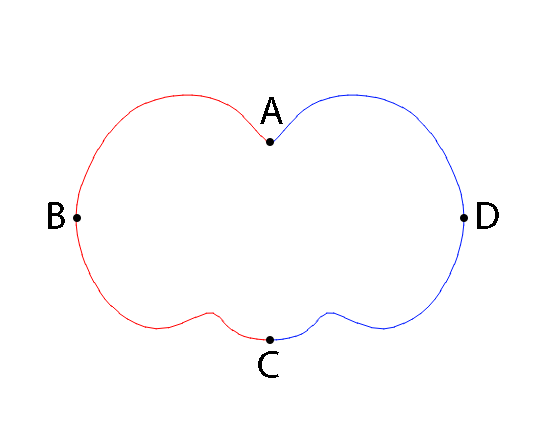
<style>
.page{position:relative;width:543px;height:427px;background:#ffffff}
.page>*{position:absolute;margin:0}
.t1{font:40px "MyriadPro-Regular";color:#000000}
</style>
<div class="page">
<p class="t1" style="left:260px;top:97px;width:23px;height:27px">A</p>
<p class="t1" style="left:48px;top:202px;width:17px;height:27px">B</p>
<p class="t1" style="left:477px;top:202px;width:22px;height:27px">D</p>
<p class="t1" style="left:258px;top:351px;width:21px;height:27px">C</p>
</div>
